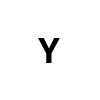
<style>
.page{position:relative;width:100px;height:100px;background:#ffffff}
.page>*{position:absolute;margin:0}
.t1{font:35px "OpenSans-Bold";color:#000000}
</style>
<div class="page">
<p class="t1" style="left:38px;top:38px;width:22px;height:25px">Y</p>
</div>
